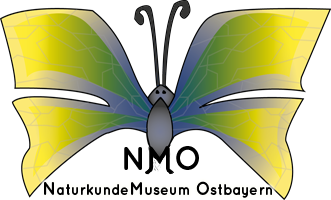
<style>
.page{position:relative;width:331px;height:200px;background:#ffffff}
.page>*{position:absolute;margin:0}
.t1{font:33.3px "Quicksand-Bold";color:#000000}
.t2{font:14.9px "Quicksand-Bold";color:#000000;scale:0.96 1}
.t3{font:18.6px "Quicksand-Bold";color:#000000;scale:0.96 1}
</style>
<div class="page">
<p class="t1" style="left:124px;top:146px;width:75px;height:24px">NMO</p>
<p class="t2" style="left:44px;top:181px;width:228px;height:17px"><span class="t3">N</span>aturkunde<span class="t3">M</span>useum <span class="t3">O</span>stbayern</p>
</div>
